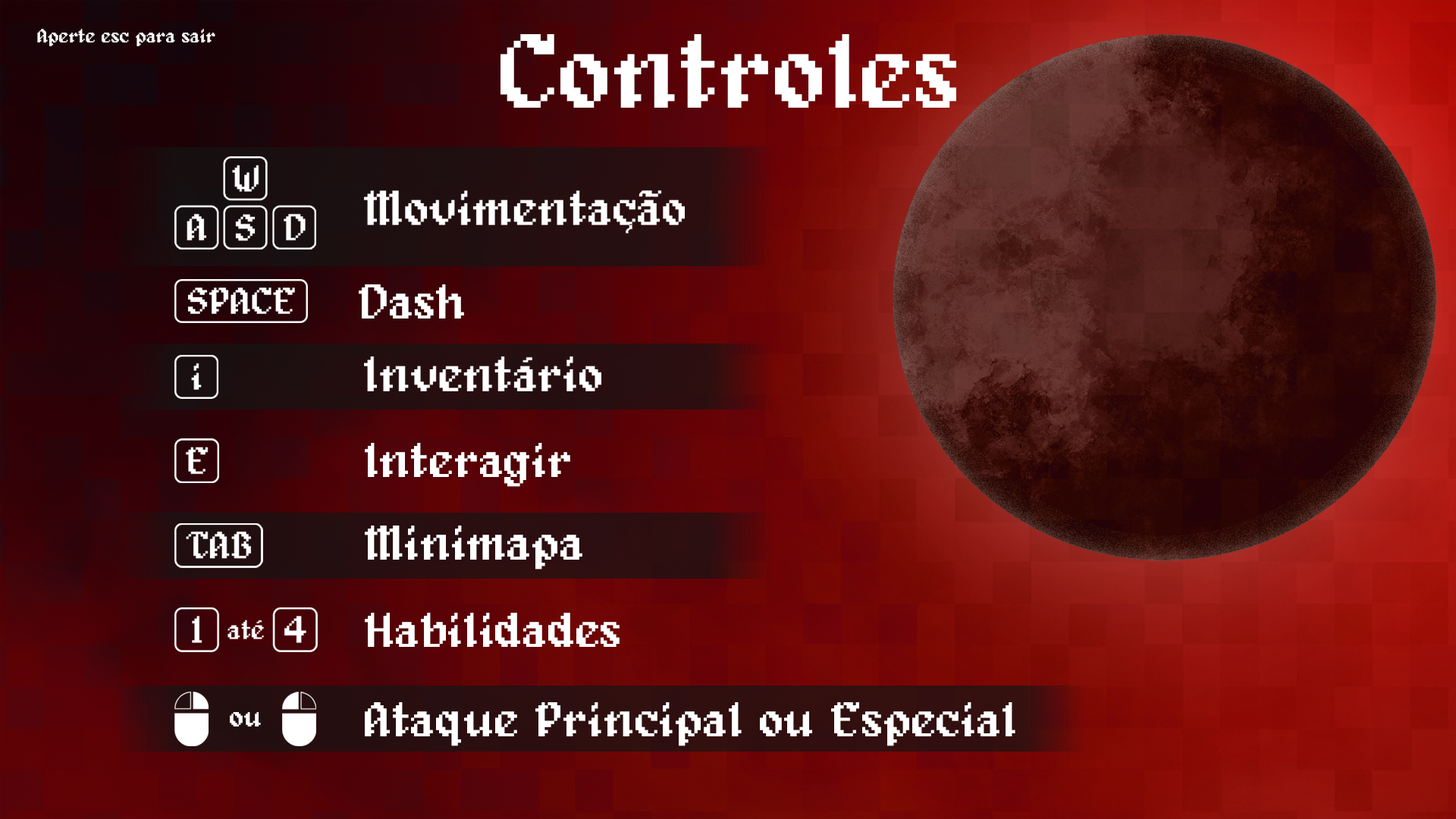
<style>
.page{position:relative;width:1456px;height:819px}
.page>*{position:absolute;margin:0}
.t1{font:19.4px "Alagard";color:#ffffff}
.t2{font:107.2px "Alagard";color:#ffffff}
.t3{font:49.8px "Alagard";color:#ffffff}
.t4{font:28.8px "Alagard";color:#ffffff}
</style>
<div class="page">
<p class="t1" style="left:37px;top:29px;width:178px;height:17px">Aperte esc para sair</p>
<p class="t2" style="left:500px;top:34px;width:456px;height:74px">Controles</p>
<p class="t3" style="left:364px;top:190px;width:321px;height:44px">Movimentação</p>
<p class="t3" style="left:359px;top:284px;width:105px;height:34px">Dash</p>
<p class="t3" style="left:364px;top:356px;width:237px;height:35px">Inventário</p>
<p class="t3" style="left:365px;top:443px;width:205px;height:44px">Interagir</p>
<p class="t3" style="left:365px;top:526px;width:217px;height:44px">Minimapa</p>
<p class="t3" style="left:365px;top:613px;width:255px;height:34px">Habilidades</p>
<p class="t4" style="left:230px;top:712px;width:31px;height:14px">ou</p>
<p class="t3" style="left:365px;top:702px;width:650px;height:44px">Ataque Principal ou Especial</p>
</div>
